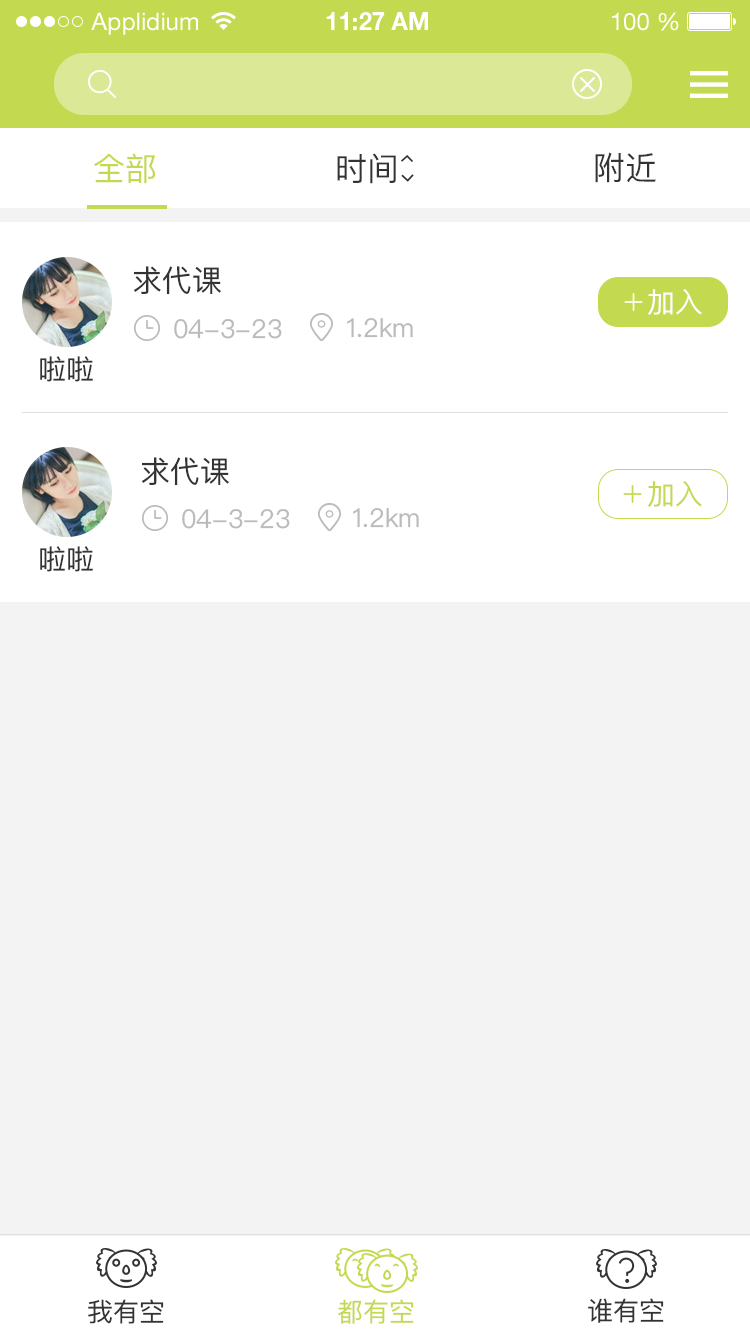
<style>
.page{position:relative;width:750px;height:1334px;background:#f3f3f3}
.page>*{position:absolute;margin:0}
.t1{font:24px "HelveticaNeueLTStd-Roman";color:#ffffff}
.t2{font:24px "HelveticaNeueLTStd-Bd";color:#ffffff}
.t3{font:32px "PingFangSC-Regular";color:#c3d94f}
.t4{font:32px "PingFangSC-Regular";color:#333333}
.t5{font:30px "PingFangSC-Regular";color:#333333}
.t6{font:28px "PingFangSC-Regular";color:#ffffff}
.t7{font:26px "PingFangSC-Regular";color:#bbbbbb}
.t8{font:28px "PingFangSC-Regular";color:#333333}
.t9{font:28px "PingFangSC-Regular";color:#c3d94f}
.t10{font:26px "PingFangSC-Regular";color:#333333}
.t11{font:26px "PingFangSC-Regular";color:#c3d94f}
</style>
<div class="page">
<p class="t1" style="left:91px;top:12px;width:107px;height:23px">Applidium</p>
<p class="t2" style="left:326px;top:12px;width:102px;height:18px">11:27 AM</p>
<p class="t1" style="left:612px;top:12px;width:67px;height:19px">100 %</p>
<p class="t3" style="left:94px;top:153px;width:61px;height:31px">全部</p>
<p class="t4" style="left:337px;top:153px;width:59px;height:31px">时间</p>
<p class="t4" style="left:595px;top:152px;width:61px;height:31px">附近</p>
<p class="t5" style="left:134px;top:266px;width:87px;height:29px">求代课</p>
<p class="t6" style="left:648px;top:289px;width:54px;height:26px">加入</p>
<p class="t7" style="left:347px;top:318px;width:66px;height:20px">1.2km</p>
<p class="t7" style="left:174px;top:319px;width:108px;height:20px">04-3-23</p>
<p class="t8" style="left:40px;top:356px;width:53px;height:26px">啦啦</p>
<p class="t5" style="left:142px;top:457px;width:87px;height:29px">求代课</p>
<p class="t9" style="left:648px;top:481px;width:54px;height:26px">加入</p>
<p class="t7" style="left:182px;top:509px;width:108px;height:20px">04-3-23</p>
<p class="t7" style="left:353px;top:508px;width:66px;height:20px">1.2km</p>
<p class="t8" style="left:40px;top:546px;width:53px;height:26px">啦啦</p>
<p class="t10" style="left:88px;top:1299px;width:76px;height:25px">我有空</p>
<p class="t11" style="left:338px;top:1299px;width:76px;height:25px">都有空</p>
<p class="t10" style="left:588px;top:1298px;width:76px;height:25px">谁有空</p>
</div>
